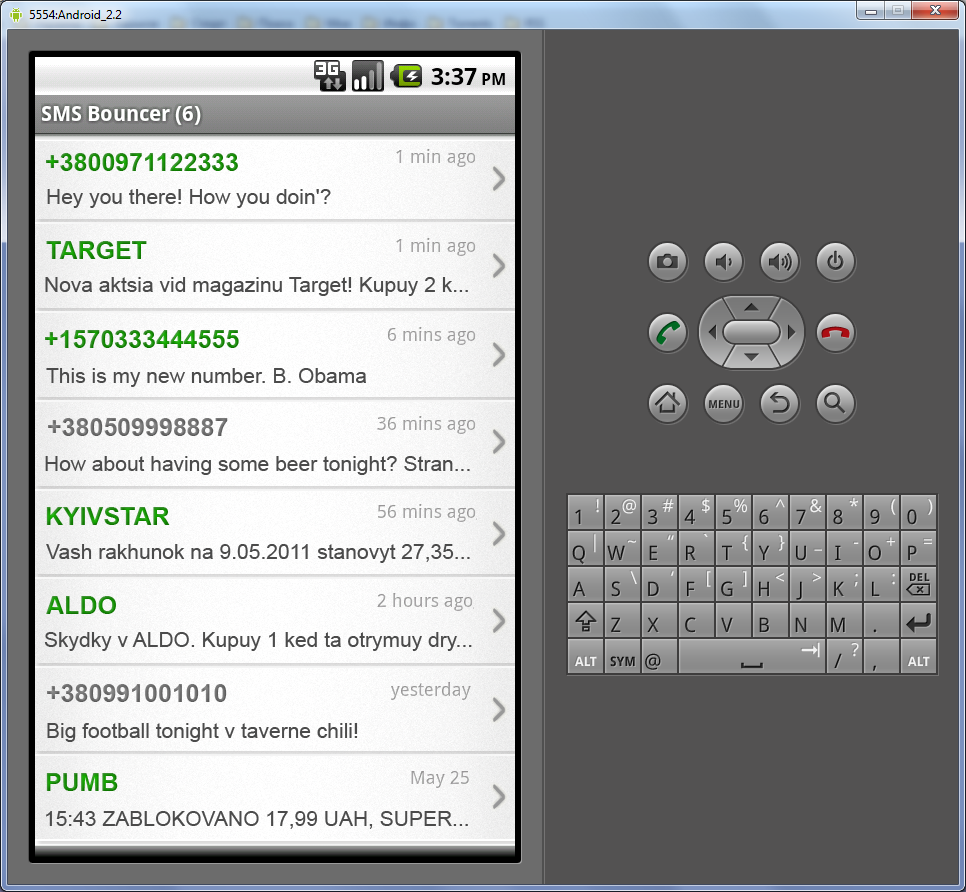
<style>
.page{position:relative;width:966px;height:892px;background:#535252}
.page>*{position:absolute;margin:0}
.t1{font:25px "Arial-BoldMT"}
.t2{font:48px "OCRAExtended";color:#999999;scale:0.59 1}
.t3{font:21px "ArialMT";color:#4b4b4b}
.t4{font:25px "Arial-BoldMT";color:#727272}
.t5{font:25px "Arial-BoldMT";color:#707070}
</style>
<div class="page">
<p class="t1" style="left:46px;top:153px;width:192px;height:18px">+3800971122333</p>
<p class="t2" style="left:493px;top:166px;width:12px;height:25px;rotate:3deg">&gt;</p>
<p class="t3" style="left:47px;top:189px;width:284px;height:19px">Hey you there! How you doin'?</p>
<p class="t1" style="left:46px;top:241px;width:101px;height:18px">TARGET</p>
<p class="t2" style="left:493px;top:253px;width:12px;height:25px;rotate:3deg">&gt;</p>
<p class="t3" style="left:45px;top:277px;width:423px;height:19px">Nova aktsia vid magazinu Target! Kupuy 2 k...</p>
<p class="t1" style="left:45px;top:330px;width:194px;height:18px">+1570333444555</p>
<p class="t2" style="left:493px;top:342px;width:12px;height:25px;rotate:3deg">&gt;</p>
<p class="t3" style="left:46px;top:368px;width:320px;height:19px">This is my new number. B. Obama</p>
<p class="t4" style="left:48px;top:418px;width:180px;height:18px">+380509998887</p>
<p class="t2" style="left:493px;top:429px;width:12px;height:25px;rotate:3deg">&gt;</p>
<p class="t3" style="left:45px;top:456px;width:425px;height:19px">How about having some beer tonight? Stran...</p>
<p class="t1" style="left:46px;top:507px;width:124px;height:18px">KYIVSTAR</p>
<p class="t2" style="left:493px;top:521px;width:12px;height:25px;rotate:3deg">&gt;</p>
<p class="t3" style="left:46px;top:544px;width:424px;height:19px">Vash rakhunok na 9.05.2011 stanovyt 27,35...</p>
<p class="t1" style="left:46px;top:596px;width:70px;height:18px">ALDO</p>
<p class="t2" style="left:493px;top:608px;width:12px;height:25px;rotate:3deg">&gt;</p>
<p class="t3" style="left:44px;top:632px;width:428px;height:19px">Skydky v ALDO. Kupuy 1 ked ta otrymuy dry...</p>
<p class="t5" style="left:47px;top:684px;width:180px;height:18px">+380991001010</p>
<p class="t2" style="left:493px;top:697px;width:12px;height:25px;rotate:3deg">&gt;</p>
<p class="t3" style="left:47px;top:723px;width:311px;height:19px">Big football tonight v taverne chili!</p>
<p class="t1" style="left:46px;top:773px;width:72px;height:18px">PUMB</p>
<p class="t3" style="left:46px;top:811px;width:422px;height:18px">15:43 ZABLOKOVANO 17,99 UAH, SUPER...</p>
</div>
